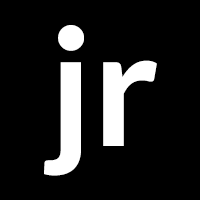
<style>
.page{position:relative;width:200px;height:200px;background:#000000}
.page>*{position:absolute;margin:0}
.t1{font:163px "Lato-Bold";color:#ffffff}
</style>
<div class="page">
<p class="t1" style="left:44px;top:25px;width:113px;height:151px">jr</p>
</div>
